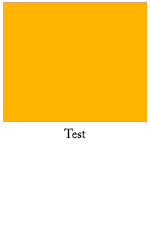
<style>
.page{position:relative;width:150px;height:250px;background:#ffffff}
.page>*{position:absolute;margin:0}
.t1{font:13px "ACaslonPro-Regular";color:#000000;scale:0.96 1}
</style>
<div class="page">
<p class="t1" style="left:64px;top:128px;width:22px;height:11px">Test</p>
</div>
